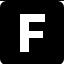
<style>
.page{position:relative;width:64px;height:64px;background:#000000}
.page>*{position:absolute;margin:0}
.t1{font:53.3px "SFMono-Heavy";color:#ffffff}
</style>
<div class="page">
<p class="t1" style="left:20px;top:13px;width:25px;height:38px">F</p>
</div>
